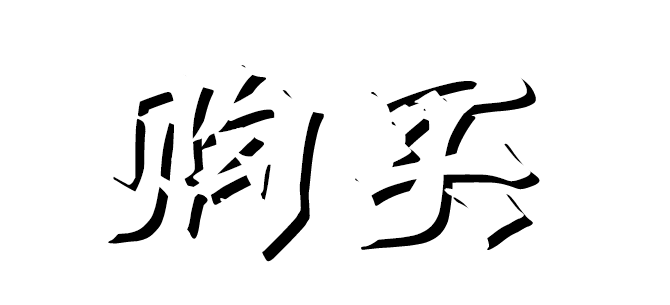
<style>
.page{position:relative;width:670px;height:305px;background:#ffffff}
.page>*{position:absolute;margin:0}
.t1{font:236.4px "AaBDK"}
</style>
<div class="page">
<p class="t1" style="left:108px;top:59px;width:432px;height:203px">购买</p>
</div>
